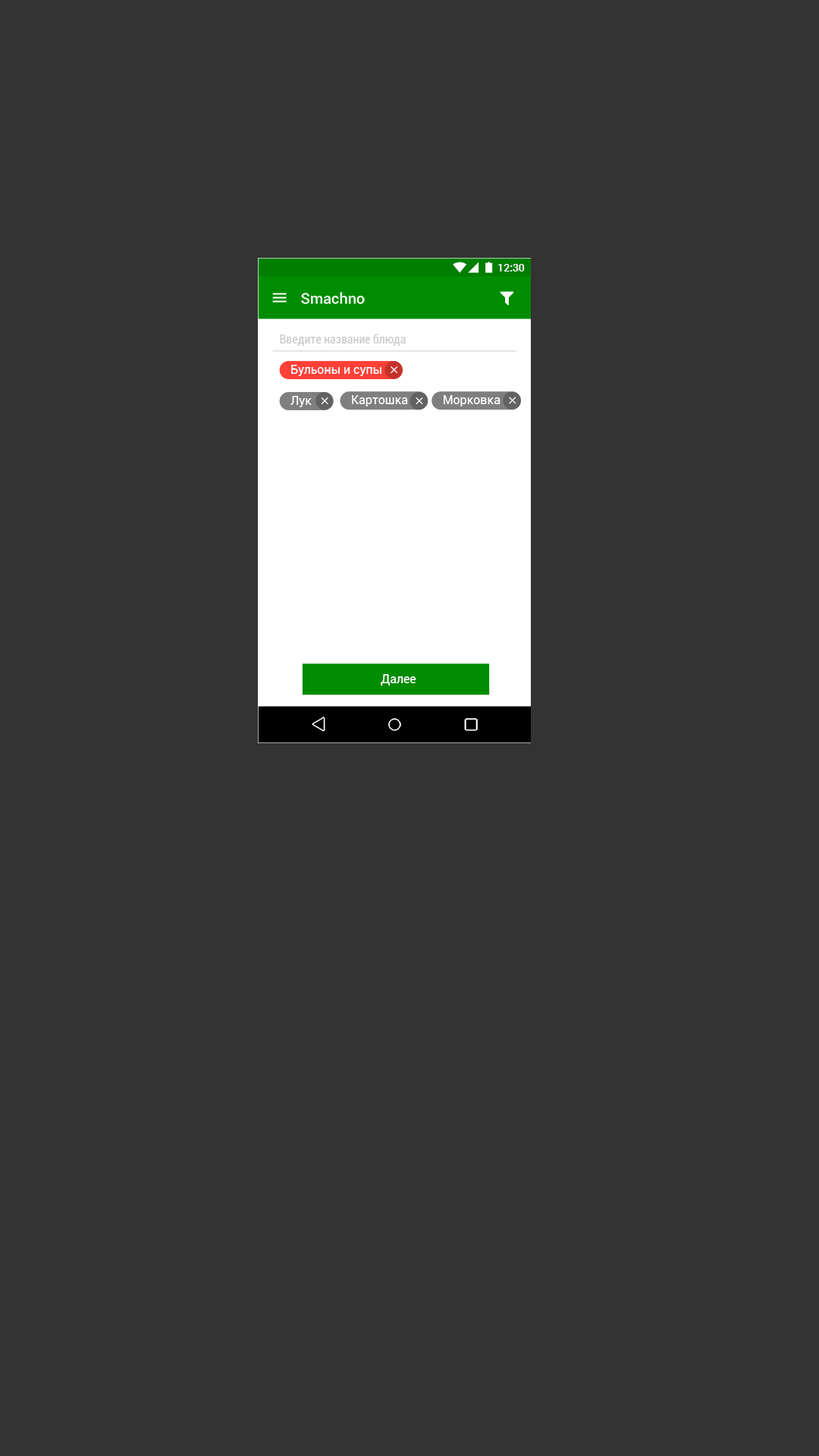
<style>
.page{position:relative;width:819px;height:1456px;background:#333333}
.page>*{position:absolute;margin:0}
.t1{font:10.6px "Roboto-Medium";color:#ffffff}
.t2{font:15.1px "Roboto-Medium";color:#ffffff}
.t3{font:12.1px "Roboto-Condensed";color:#cccccc}
.t4{font:12.1px "Roboto-Regular";color:#ffffff}
</style>
<div class="page">
<p class="t1" style="left:498px;top:264px;width:27px;height:7px">12:30</p>
<p class="t2" style="left:301px;top:292px;width:64px;height:12px">Smachno</p>
<p class="t3" style="left:280px;top:334px;width:126px;height:12px">Введите название блюда</p>
<p class="t4" style="left:291px;top:365px;width:90px;height:11px">Бульоны и супы</p>
<p class="t4" style="left:290px;top:396px;width:22px;height:11px">Лук</p>
<p class="t4" style="left:352px;top:395px;width:56px;height:11px">Картошка</p>
<p class="t4" style="left:444px;top:395px;width:56px;height:11px">Морковка</p>
<p class="t4" style="left:381px;top:674px;width:35px;height:12px">Далее</p>
</div>
